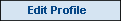
<style>
.page{position:relative;width:121px;height:21px;background:#d5e4f2}
.page>*{position:absolute;margin:0}
.t1{font:11px "Arial-BoldMT";color:#064787}
</style>
<div class="page">
<p class="t1" style="left:28px;top:6px;width:58px;height:8px">Edit Profile</p>
</div>
